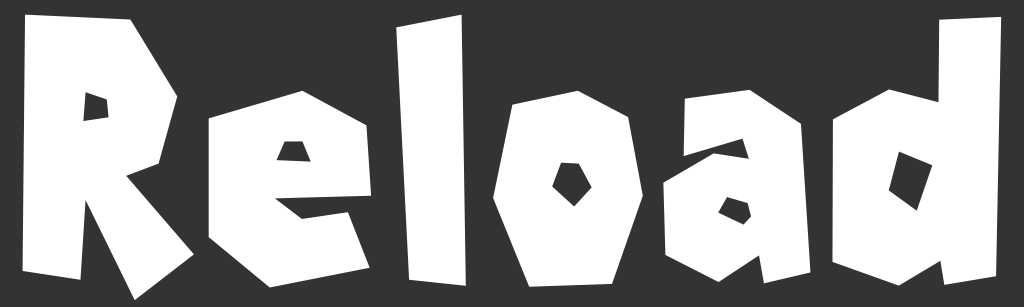
<style>
.page{position:relative;width:1024px;height:307px;background:#333333}
.page>*{position:absolute;margin:0}
.t1{font:384.7px "PolygonParty";color:#ffffff;scale:0.78 1}
</style>
<div class="page">
<p class="t1" style="left:22px;top:14px;width:980px;height:287px">Reload</p>
</div>
